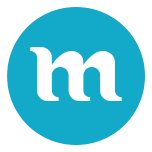
<style>
.page{position:relative;width:152px;height:152px;background:#13aac9}
.page>*{position:absolute;margin:0}
.t1{font:138px "Hulse";color:#13aac9}
</style>
<div class="page">
<p class="t1" style="left:7px;top:7px;width:138px;height:138px">M</p>
</div>
